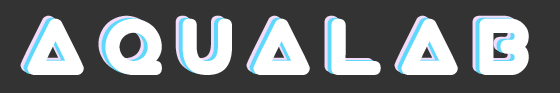
<style>
.page{position:relative;width:560px;height:93px;background:#333333}
.page>*{position:absolute;margin:0}
.t1{font:72px "Virgo01";letter-spacing:0.2em}
.t2{font:72px "Virgo01";letter-spacing:0.2em;color:#ffffff}
</style>
<div class="page">
<p class="t1" style="left:20px;top:15px;width:502px;height:57px">AquaLab</p>
<p class="t2" style="left:23px;top:17px;width:502px;height:57px">AquaLab</p>
<p class="t2" style="left:27px;top:18px;width:502px;height:57px">AquaLab</p>
</div>
